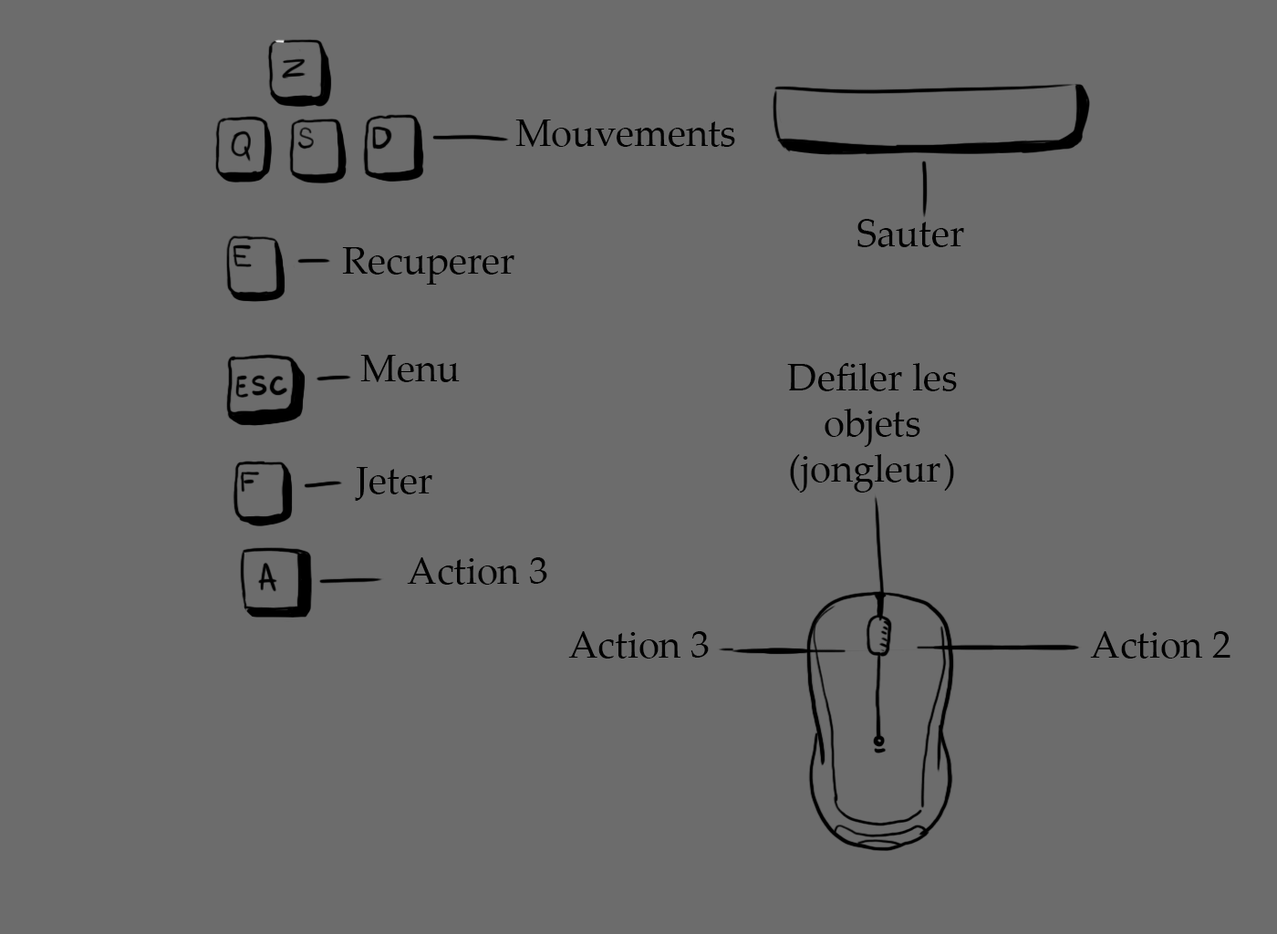
<style>
.page{position:relative;width:1277px;height:934px;background:#6c6c6c}
.page>*{position:absolute;margin:0}
.t1{font:38px "PalatinoLinotype-Roman";color:#000000}
.t2{font:38px "PalatinoLinotype-Roman";color:#010101}
</style>
<div class="page">
<p class="t1" style="left:515px;top:119px;width:220px;height:28px">Mouvements</p>
<p class="t1" style="left:857px;top:219px;width:107px;height:28px">Sauter</p>
<p class="t1" style="left:342px;top:247px;width:172px;height:38px">Recuperer</p>
<p class="t1" style="left:360px;top:355px;width:100px;height:27px">Menu</p>
<p class="t1" style="left:787px;top:363px;width:170px;height:129px;text-align:center">Defiler les<br>objets <br>(jongleur)</p>
<p class="t2" style="left:355px;top:467px;width:77px;height:34px;text-align:center">Jeter<br><br>t</p>
<p class="t1" style="left:407px;top:557px;width:140px;height:28px">Action 3</p>
<p class="t1" style="left:568px;top:631px;width:141px;height:27px">Action 3</p>
<p class="t1" style="left:1090px;top:631px;width:140px;height:27px">Action 2</p>
</div>
